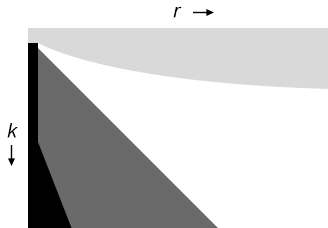
<style>
.page{position:relative;width:328px;height:228px;background:#ffffff}
.page>*{position:absolute;margin:0}
.t1{font:20px "Arial-ItalicMT";color:#000000}
</style>
<div class="page">
<p class="t1" style="left:173px;top:6px;width:9px;height:12px">r</p>
<p class="t1" style="left:7px;top:123px;width:11px;height:15px">k</p>
</div>
